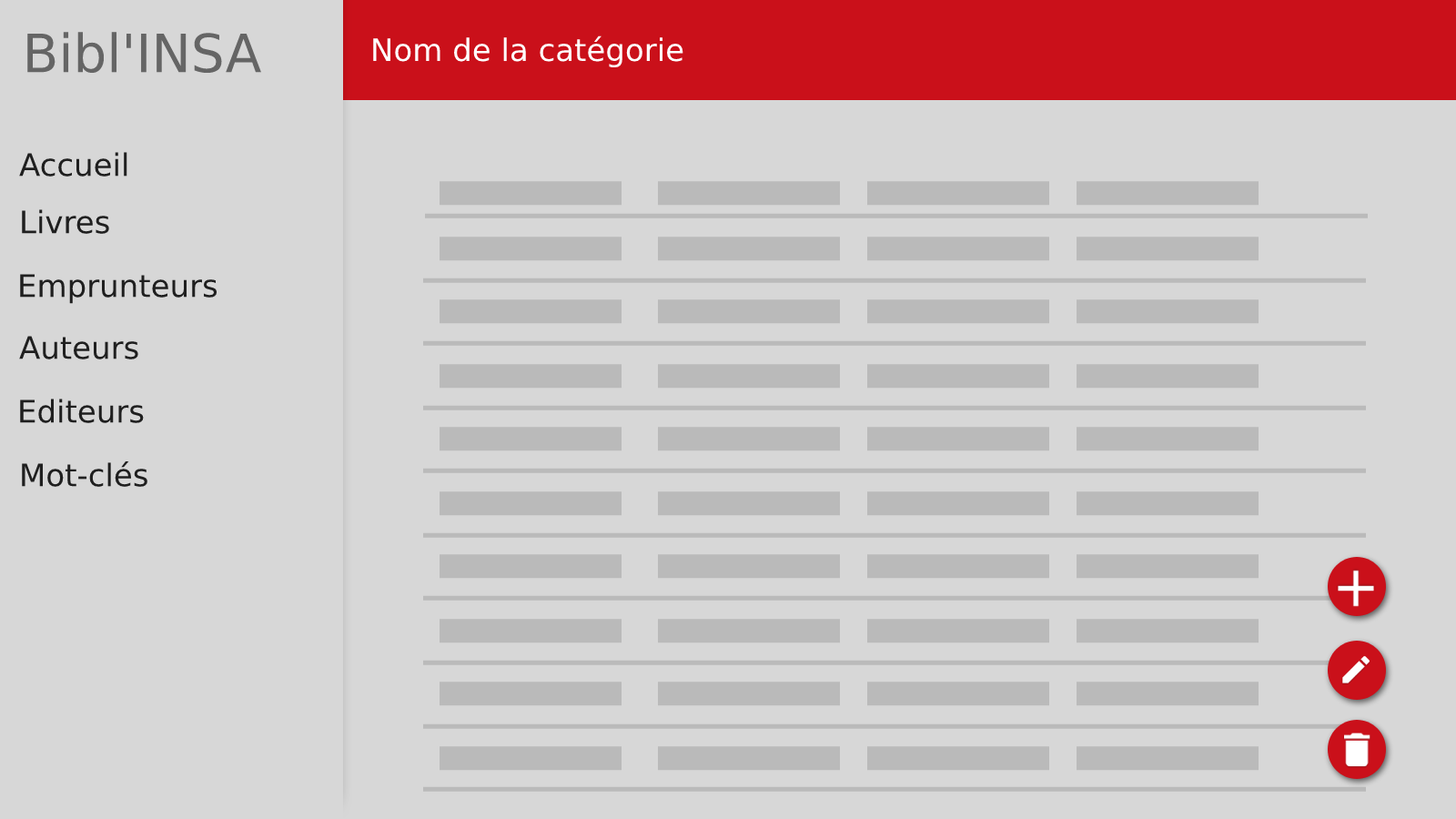
<style>
.page{position:relative;width:1456px;height:819px;background:#d7d7d7}
.page>*{position:absolute;margin:0}
.t1{font:52.8px "DejaVuSans";color:#656565}
.t2{font:30.9px "DejaVuSans";color:#ffffff}
.t3{font:30.9px "DejaVuSans";color:#1f1f1f}
</style>
<div class="page">
<p class="t1" style="left:27px;top:32px;width:234px;height:42px">Bibl'INSA</p>
<p class="t2" style="left:373px;top:35px;width:310px;height:33px">Nom de la catégorie</p>
<p class="t3" style="left:19px;top:152px;width:108px;height:25px">Accueil</p>
<p class="t3" style="left:22px;top:209px;width:87px;height:25px">Livres</p>
<p class="t3" style="left:20px;top:274px;width:197px;height:30px">Emprunteurs</p>
<p class="t3" style="left:19px;top:336px;width:119px;height:23px">Auteurs</p>
<p class="t3" style="left:20px;top:399px;width:124px;height:24px">Editeurs</p>
<p class="t3" style="left:22px;top:461px;width:125px;height:26px">Mot-clés</p>
</div>
